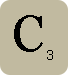
<style>
.page{position:relative;width:68px;height:75px;background:#c1baa0}
.page>*{position:absolute;margin:0}
.t1{font:50px "Georgia";color:#000000}
.t2{font:13.9px "Georgia";color:#000000}
</style>
<div class="page">
<p class="t1" style="left:14px;top:15px;width:29px;height:37px">C</p>
<p class="t2" style="left:47px;top:50px;width:6px;height:10px">3</p>
</div>
